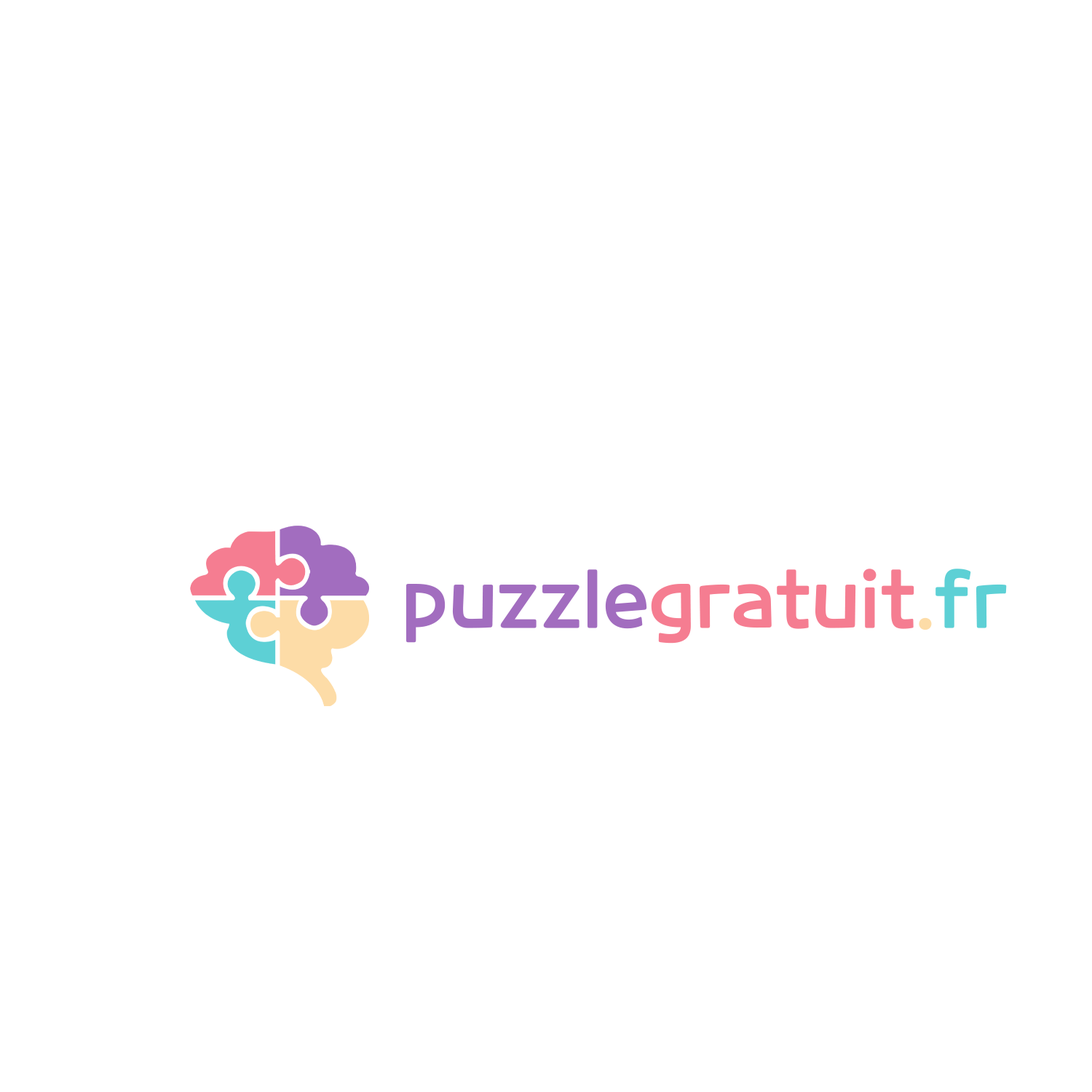
<style>
.page{position:relative;width:1092px;height:1092px;background:#ffffff}
.page>*{position:absolute;margin:0}
.t1{font:76.7px "CookieRunOTF-Regular";color:#f57d91}
.t2{font:76.7px "CookieRunOTF-Regular";color:#a26dbf}
.t3{font:76.7px "CookieRunOTF-Regular";color:#fddca7}
.t4{font:76.7px "CookieRunOTF-Regular";color:#5dd0d5}
</style>
<div class="page">
<p class="t1" style="left:406px;top:569px;width:601px;height:75px"><span class="t2">puzzle</span>gratuit<span class="t3">.</span><span class="t4">fr</span></p>
</div>
